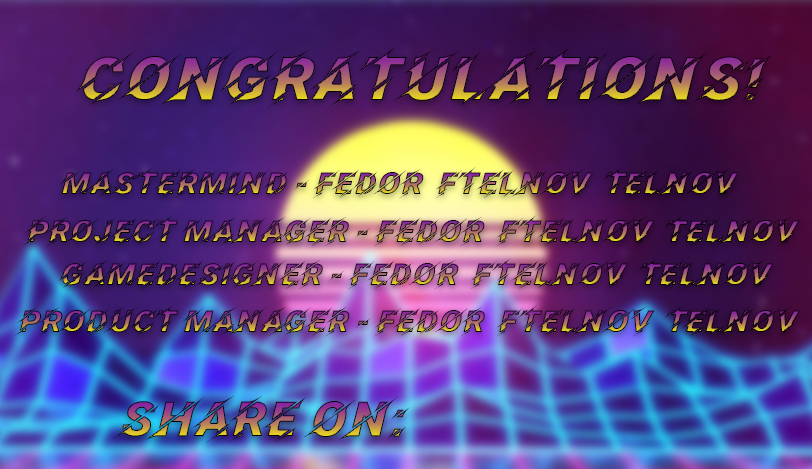
<style>
.page{position:relative;width:812px;height:469px}
.page>*{position:absolute;margin:0}
.t1{font:60px "Facon"}
.t2{font:30px "Facon"}
.t3{font:48px "Facon"}
</style>
<div class="page">
<p class="t1" style="left:75px;top:46px;width:698px;height:63px">Congratulations!</p>
<p class="t2" style="left:60px;top:167px;width:679px;height:32px">MasterMind - Fedor  Ftelnov  Telnov</p>
<p class="t2" style="left:22px;top:215px;width:778px;height:32px">Project Manager - Fedor  Ftelnov  Telnov</p>
<p class="t2" style="left:58px;top:258px;width:716px;height:32px">GameDesigner - Fedor  Ftelnov  Telnov</p>
<p class="t2" style="left:14px;top:305px;width:786px;height:32px">Product Manager - Fedor  Ftelnov  Telnov</p>
<p class="t3" style="left:112px;top:395px;width:298px;height:48px">Share On:</p>
</div>
